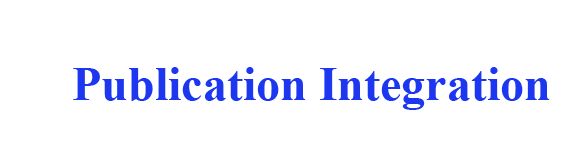
<style>
.page{position:relative;width:581px;height:152px;background:#ffffff}
.page>*{position:absolute;margin:0}
.t1{font:48px "TimesNewRomanPS-BoldMT";color:#1d36f0}
</style>
<div class="page">
<p class="t1" style="left:73px;top:67px;width:477px;height:43px">Publication Integration</p>
</div>
